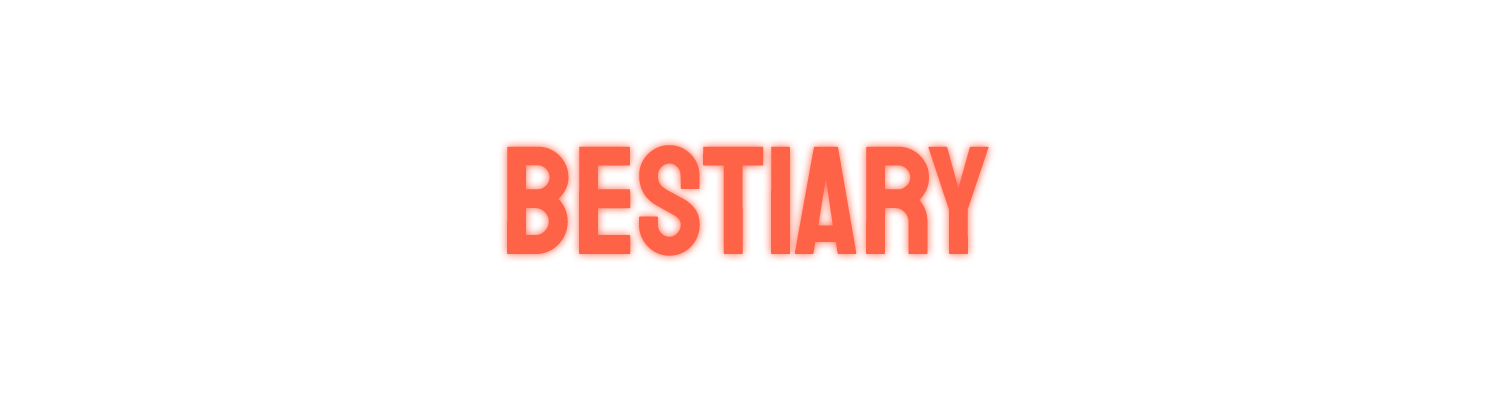
<style>
.page{position:relative;width:1500px;height:400px;background:#ffffff}
.page>*{position:absolute;margin:0}
.t1{font:154px "Staatliches-Regular";color:#ff6347;text-transform:uppercase}
</style>
<div class="page">
<p class="t1" style="left:507px;top:145px;width:482px;height:111px">BESTiary</p>
</div>
